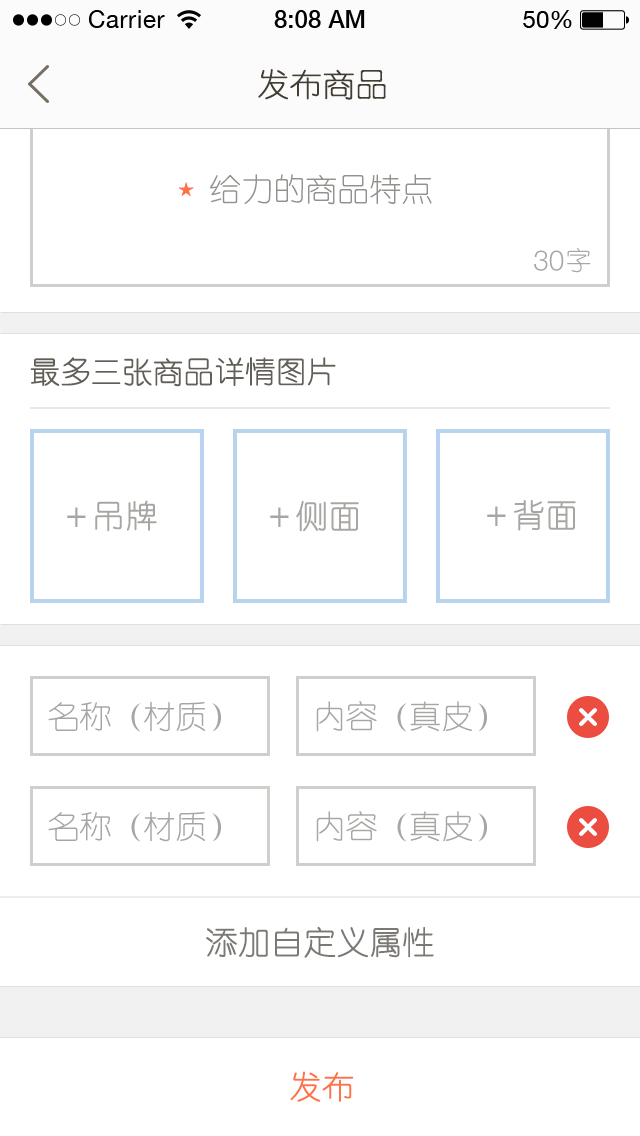
<style>
.page{position:relative;width:640px;height:1136px;background:#ffffff}
.page>*{position:absolute;margin:0}
.t1{font:32px "YouYuan";color:#433d33;text-transform:uppercase;font-weight:bold}
.t2{font:32px "YouYuan";color:#93918d;text-transform:uppercase}
.t3{font:28px "HelveticaNeueLTPro-Lt";color:#a7a6a3;text-transform:uppercase}
.t4{font:26px "YouYuan";color:#a7a6a3;text-transform:uppercase}
.t5{font:30px "YouYuan";color:#625e58;text-transform:uppercase;font-weight:bold}
.t6{font:32px "YouYuan";color:#a7a6a3;text-transform:uppercase;font-weight:bold}
.t7{font:32px "YouYuan";color:#a7a6a3;text-transform:uppercase}
.t8{font:32px "YouYuan";color:#7b7973;text-transform:uppercase;font-weight:bold}
.t9{font:32px "YouYuan";color:#ff7248;text-transform:uppercase;font-weight:bold}
</style>
<div class="page">
<p class="t1" style="left:258px;top:69px;width:128px;height:31px">发布商品</p>
<p class="t2" style="left:210px;top:174px;width:222px;height:31px">给力的商品特点</p>
<p class="t3" style="left:534px;top:250px;width:30px;height:21px">30</p>
<p class="t4" style="left:567px;top:248px;width:24px;height:25px">字</p>
<p class="t5" style="left:30px;top:357px;width:306px;height:30px">最多三张商品详情图片</p>
<p class="t6" style="left:67px;top:500px;width:90px;height:32px">＋吊牌</p>
<p class="t6" style="left:270px;top:500px;width:89px;height:32px">＋侧面</p>
<p class="t6" style="left:487px;top:500px;width:89px;height:31px">＋背面</p>
<p class="t7" style="left:48px;top:701px;width:173px;height:31px">名称（材质）</p>
<p class="t7" style="left:316px;top:701px;width:171px;height:31px">内容（真皮）</p>
<p class="t7" style="left:48px;top:811px;width:173px;height:31px">名称（材质）</p>
<p class="t7" style="left:316px;top:811px;width:171px;height:31px">内容（真皮）</p>
<p class="t8" style="left:206px;top:926px;width:228px;height:32px">添加自定义属性</p>
<p class="t9" style="left:290px;top:1071px;width:64px;height:31px">发布</p>
</div>
